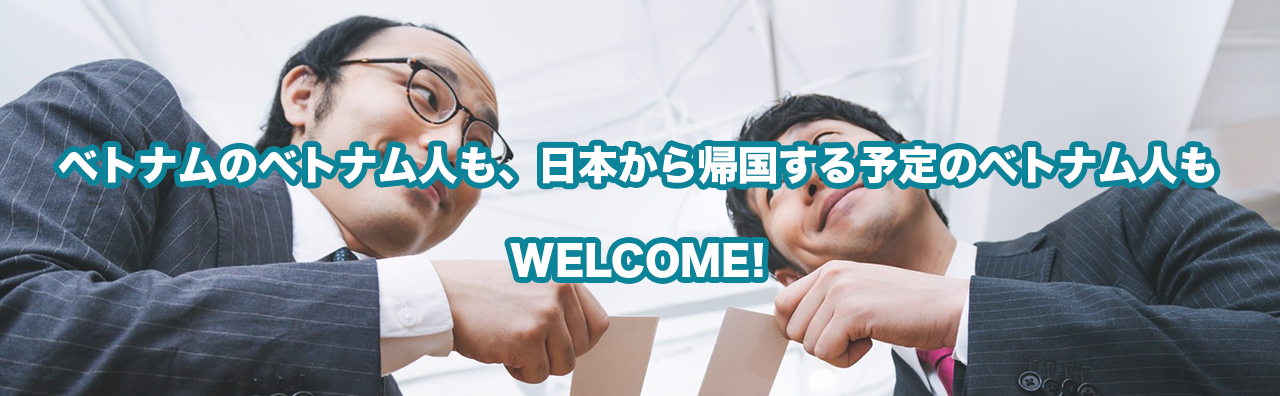
<style>
.page{position:relative;width:1280px;height:396px}
.page>*{position:absolute;margin:0}
.t1{font:40px "HiraKakuStd-W8";color:#ffffff}
</style>
<div class="page">
<p class="t1" style="left:58px;top:145px;width:1157px;height:133px;text-align:center">ベトナムのベトナム人も、日本から帰国する予定のベトナム人も<br><br>WELCOME!</p>
</div>
